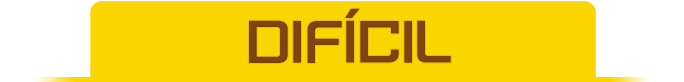
<style>
.page{position:relative;width:684px;height:82px;background:#fbd500}
.page>*{position:absolute;margin:0}
.t1{font:48px "KafuTechnoStd-HV";letter-spacing:0.001em;color:#804412}
</style>
<div class="page">
<p class="t1" style="left:249px;top:8px;width:202px;height:55px">DIFÍCIL</p>
</div>
